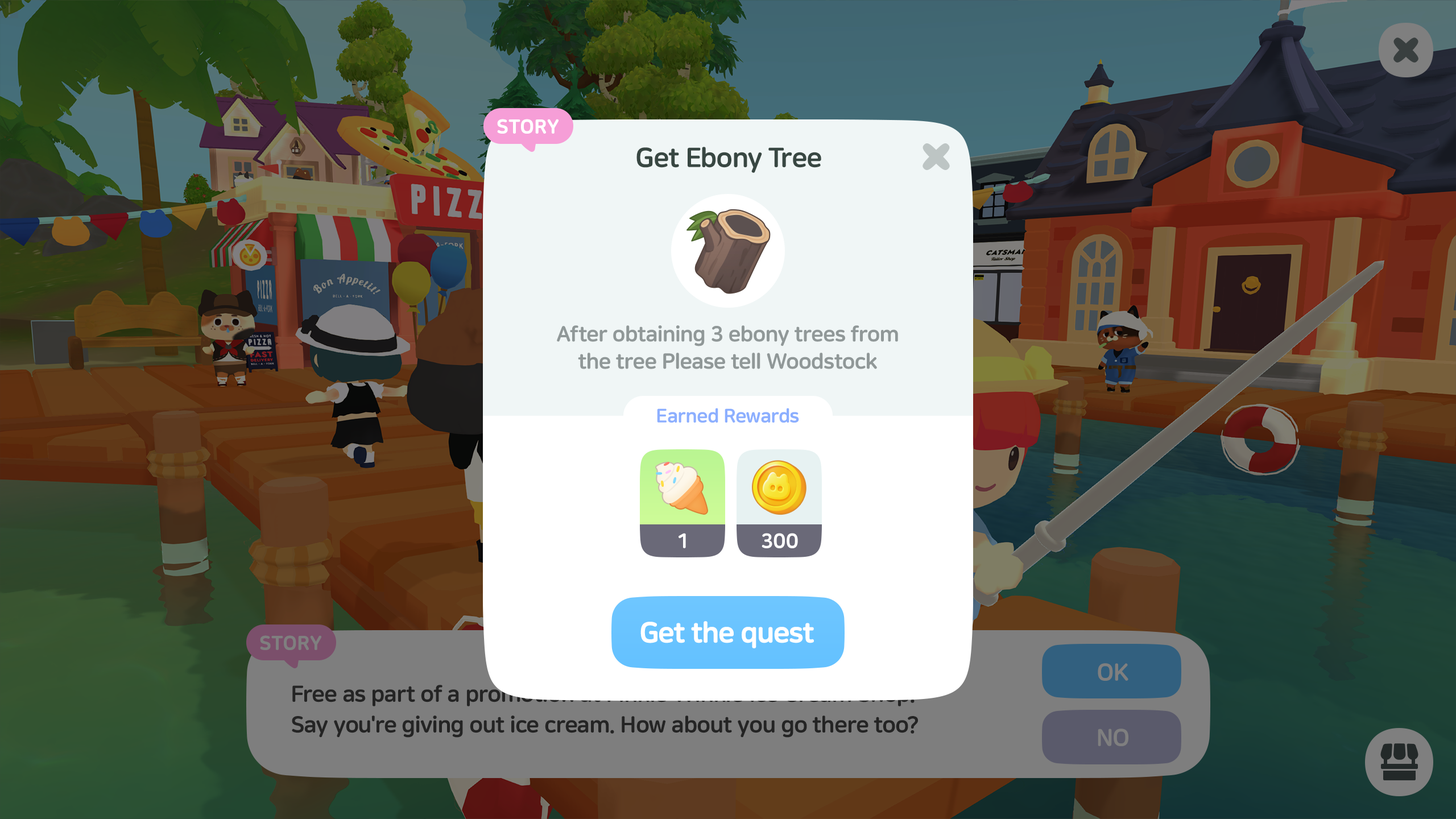
<style>
.page{position:relative;width:1456px;height:819px}
.page>*{position:absolute;margin:0}
.t1{font:19.3px "NanumSquareRoundOTFEB";color:#ffffff;text-transform:uppercase;font-weight:bold}
.t2{font:27.3px "NanumSquareRoundOTFEB";letter-spacing:-0.02em;color:#384742}
.t3{font:21.6px/27.3px "NanumSquareRoundOTFEB";letter-spacing:-0.02em;color:#909898}
.t4{font:19.3px "NanumSquareRoundOTFEB";letter-spacing:-0.02em;color:#8cafff}
.t5{font:20.5px "NanumSquareRoundOTFEB";color:#ffffff}
.t6{font:28.4px "NanumSquareRoundOTFEB";letter-spacing:-0.05em;color:#ffffff;font-weight:bold}
</style>
<div class="page">
<p class="t1" style="left:497px;top:119px;width:62px;height:15px">Story</p>
<p class="t2" style="left:636px;top:147px;width:185px;height:26px">Get Ebony Tree</p>
<p class="t3" style="left:557px;top:325px;width:341px;height:44px;text-align:center">After obtaining 3 ebony trees from<br>the tree Please tell Woodstock</p>
<p class="t4" style="left:657px;top:408px;width:142px;height:15px">Earned Rewards</p>
<p class="t5" style="left:679px;top:533px;width:7px;height:15px">1</p>
<p class="t5" style="left:762px;top:533px;width:36px;height:15px">300</p>
<p class="t6" style="left:640px;top:621px;width:174px;height:27px">Get the quest</p>
</div>
